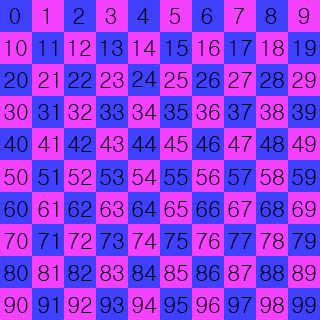
<style>
.page{position:relative;width:320px;height:320px;background:#4040ff}
.page>*{position:absolute;margin:0}
.t1{font:22.3px "Gulim";color:#000000}
</style>
<div class="page">
<p class="t1" style="left:9px;top:8px;width:11px;height:16px">0</p>
<p class="t1" style="left:43px;top:8px;width:5px;height:16px">1</p>
<p class="t1" style="left:73px;top:8px;width:11px;height:16px">2</p>
<p class="t1" style="left:105px;top:8px;width:12px;height:16px">3</p>
<p class="t1" style="left:137px;top:8px;width:12px;height:16px">4</p>
<p class="t1" style="left:169px;top:8px;width:12px;height:16px">5</p>
<p class="t1" style="left:201px;top:8px;width:12px;height:16px">6</p>
<p class="t1" style="left:234px;top:8px;width:11px;height:16px">7</p>
<p class="t1" style="left:265px;top:8px;width:12px;height:16px">8</p>
<p class="t1" style="left:298px;top:8px;width:12px;height:16px">9</p>
<p class="t1" style="left:5px;top:40px;width:22px;height:16px">10</p>
<p class="t1" style="left:39px;top:40px;width:18px;height:16px">11</p>
<p class="t1" style="left:69px;top:40px;width:22px;height:16px">12</p>
<p class="t1" style="left:101px;top:40px;width:22px;height:16px">13</p>
<p class="t1" style="left:133px;top:40px;width:23px;height:16px">14</p>
<p class="t1" style="left:166px;top:40px;width:22px;height:16px">15</p>
<p class="t1" style="left:198px;top:40px;width:22px;height:16px">16</p>
<p class="t1" style="left:230px;top:40px;width:22px;height:16px">17</p>
<p class="t1" style="left:262px;top:40px;width:22px;height:16px">18</p>
<p class="t1" style="left:294px;top:40px;width:22px;height:16px">19</p>
<p class="t1" style="left:4px;top:72px;width:24px;height:16px">20</p>
<p class="t1" style="left:38px;top:72px;width:20px;height:16px">21</p>
<p class="t1" style="left:68px;top:72px;width:24px;height:16px">22</p>
<p class="t1" style="left:100px;top:72px;width:24px;height:16px">23</p>
<p class="t1" style="left:132px;top:71px;width:25px;height:16px">24</p>
<p class="t1" style="left:164px;top:72px;width:24px;height:16px">25</p>
<p class="t1" style="left:196px;top:72px;width:24px;height:16px">26</p>
<p class="t1" style="left:228px;top:72px;width:24px;height:16px">27</p>
<p class="t1" style="left:260px;top:72px;width:24px;height:16px">28</p>
<p class="t1" style="left:292px;top:72px;width:24px;height:16px">29</p>
<p class="t1" style="left:4px;top:104px;width:24px;height:16px">30</p>
<p class="t1" style="left:38px;top:104px;width:20px;height:16px">31</p>
<p class="t1" style="left:68px;top:104px;width:24px;height:16px">32</p>
<p class="t1" style="left:100px;top:104px;width:24px;height:16px">33</p>
<p class="t1" style="left:132px;top:104px;width:25px;height:16px">34</p>
<p class="t1" style="left:164px;top:104px;width:24px;height:16px">35</p>
<p class="t1" style="left:196px;top:104px;width:24px;height:16px">36</p>
<p class="t1" style="left:228px;top:104px;width:24px;height:16px">37</p>
<p class="t1" style="left:260px;top:104px;width:24px;height:16px">38</p>
<p class="t1" style="left:292px;top:104px;width:24px;height:16px">39</p>
<p class="t1" style="left:4px;top:136px;width:24px;height:16px">40</p>
<p class="t1" style="left:38px;top:136px;width:20px;height:16px">41</p>
<p class="t1" style="left:68px;top:136px;width:24px;height:16px">42</p>
<p class="t1" style="left:100px;top:136px;width:24px;height:16px">43</p>
<p class="t1" style="left:132px;top:136px;width:25px;height:16px">44</p>
<p class="t1" style="left:164px;top:136px;width:24px;height:16px">45</p>
<p class="t1" style="left:196px;top:136px;width:24px;height:16px">46</p>
<p class="t1" style="left:228px;top:136px;width:24px;height:16px">47</p>
<p class="t1" style="left:260px;top:136px;width:24px;height:16px">48</p>
<p class="t1" style="left:292px;top:136px;width:24px;height:16px">49</p>
<p class="t1" style="left:4px;top:169px;width:24px;height:16px">50</p>
<p class="t1" style="left:38px;top:169px;width:20px;height:16px">51</p>
<p class="t1" style="left:68px;top:169px;width:24px;height:16px">52</p>
<p class="t1" style="left:100px;top:169px;width:24px;height:16px">53</p>
<p class="t1" style="left:132px;top:169px;width:25px;height:16px">54</p>
<p class="t1" style="left:164px;top:169px;width:24px;height:16px">55</p>
<p class="t1" style="left:196px;top:169px;width:24px;height:16px">56</p>
<p class="t1" style="left:228px;top:169px;width:24px;height:16px">57</p>
<p class="t1" style="left:260px;top:169px;width:24px;height:16px">58</p>
<p class="t1" style="left:292px;top:169px;width:24px;height:16px">59</p>
<p class="t1" style="left:4px;top:201px;width:24px;height:16px">60</p>
<p class="t1" style="left:38px;top:201px;width:20px;height:16px">61</p>
<p class="t1" style="left:68px;top:201px;width:24px;height:16px">62</p>
<p class="t1" style="left:100px;top:201px;width:24px;height:16px">63</p>
<p class="t1" style="left:132px;top:201px;width:25px;height:16px">64</p>
<p class="t1" style="left:164px;top:201px;width:24px;height:16px">65</p>
<p class="t1" style="left:196px;top:201px;width:24px;height:16px">66</p>
<p class="t1" style="left:228px;top:201px;width:24px;height:16px">67</p>
<p class="t1" style="left:260px;top:201px;width:24px;height:16px">68</p>
<p class="t1" style="left:292px;top:201px;width:24px;height:16px">69</p>
<p class="t1" style="left:4px;top:233px;width:24px;height:16px">70</p>
<p class="t1" style="left:38px;top:233px;width:20px;height:16px">71</p>
<p class="t1" style="left:68px;top:233px;width:24px;height:16px">72</p>
<p class="t1" style="left:100px;top:233px;width:24px;height:16px">73</p>
<p class="t1" style="left:132px;top:233px;width:25px;height:16px">74</p>
<p class="t1" style="left:164px;top:233px;width:24px;height:16px">75</p>
<p class="t1" style="left:196px;top:233px;width:24px;height:16px">76</p>
<p class="t1" style="left:228px;top:233px;width:24px;height:16px">77</p>
<p class="t1" style="left:260px;top:233px;width:24px;height:16px">78</p>
<p class="t1" style="left:292px;top:233px;width:24px;height:16px">79</p>
<p class="t1" style="left:4px;top:265px;width:24px;height:16px">80</p>
<p class="t1" style="left:38px;top:265px;width:20px;height:16px">81</p>
<p class="t1" style="left:68px;top:265px;width:24px;height:16px">82</p>
<p class="t1" style="left:100px;top:265px;width:24px;height:16px">83</p>
<p class="t1" style="left:132px;top:265px;width:25px;height:16px">84</p>
<p class="t1" style="left:164px;top:265px;width:24px;height:16px">85</p>
<p class="t1" style="left:196px;top:265px;width:24px;height:16px">86</p>
<p class="t1" style="left:228px;top:265px;width:24px;height:16px">87</p>
<p class="t1" style="left:260px;top:265px;width:24px;height:16px">88</p>
<p class="t1" style="left:292px;top:265px;width:24px;height:16px">89</p>
<p class="t1" style="left:4px;top:297px;width:24px;height:16px">90</p>
<p class="t1" style="left:38px;top:297px;width:20px;height:16px">91</p>
<p class="t1" style="left:68px;top:297px;width:24px;height:16px">92</p>
<p class="t1" style="left:100px;top:297px;width:24px;height:16px">93</p>
<p class="t1" style="left:132px;top:297px;width:25px;height:16px">94</p>
<p class="t1" style="left:164px;top:297px;width:24px;height:16px">95</p>
<p class="t1" style="left:196px;top:297px;width:24px;height:16px">96</p>
<p class="t1" style="left:228px;top:297px;width:24px;height:16px">97</p>
<p class="t1" style="left:260px;top:297px;width:24px;height:16px">98</p>
<p class="t1" style="left:292px;top:297px;width:24px;height:16px">99</p>
</div>
